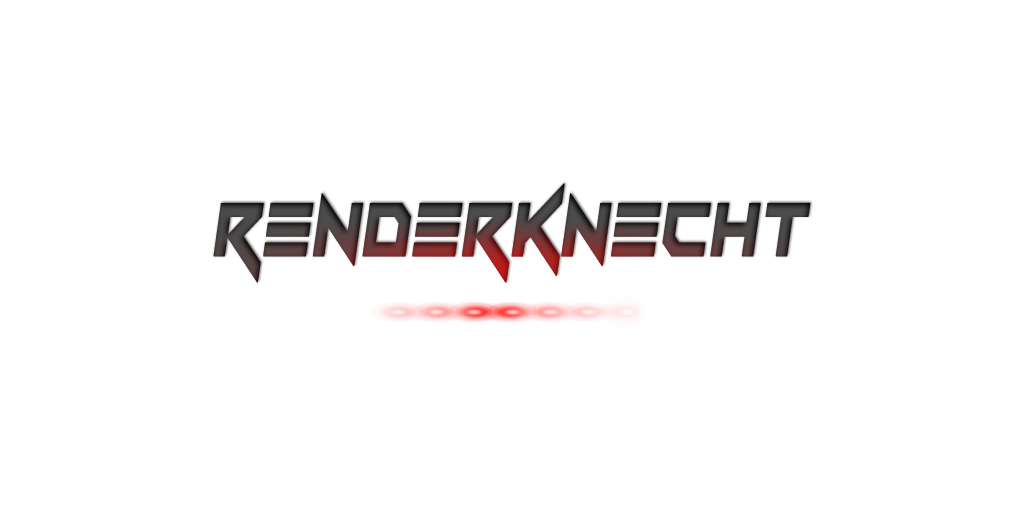
<style>
.page{position:relative;width:1024px;height:512px;background:#ffffff}
.page>*{position:absolute;margin:0}
.t1{font:105px "Vermin-Vibes";font-weight:bold;font-style:italic;scale:0.8 1}
</style>
<div class="page">
<p class="t1" style="left:213px;top:183px;width:598px;height:100px">RenderKnecht</p>
</div>
